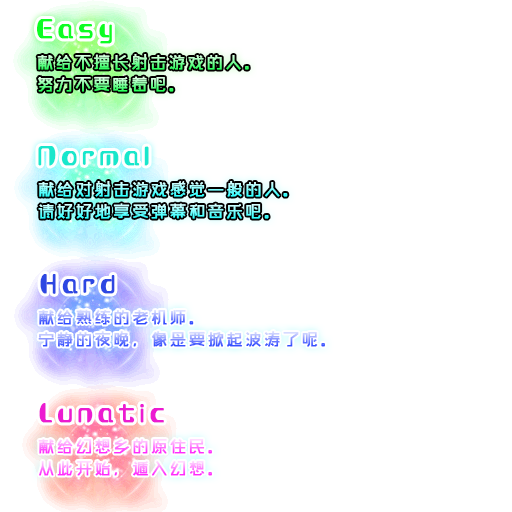
<style>
.page{position:relative;width:512px;height:512px;background:#ffffff}
.page>*{position:absolute;margin:0}
.t1{font:24px "MFKeKe_Noncommercial-Regular";letter-spacing:0.15em;color:#0dfd23;font-weight:bold}
.t2{font:16px "MFShangHei_Noncommercial-Regular";letter-spacing:0.15em;font-weight:bold}
.t3{font:24px "MFKeKe_Noncommercial-Regular";letter-spacing:0.15em;color:#19e7cc;font-weight:bold}
.t4{font:24px "MFKeKe_Noncommercial-Regular";letter-spacing:0.15em;color:#2d47e2;font-weight:bold}
.t5{font:24px "MFKeKe_Noncommercial-Regular";letter-spacing:0.15em;color:#ec1bd1;font-weight:bold}
</style>
<div class="page">
<p class="t1" style="left:37px;top:19px;width:75px;height:25px">Easy</p>
<p class="t2" style="left:37px;top:54px;width:212px;height:16px">献给不擅长射击游戏的人。</p>
<p class="t2" style="left:38px;top:76px;width:136px;height:16px">努力不要睡着吧。</p>
<p class="t3" style="left:38px;top:146px;width:111px;height:20px">Normal</p>
<p class="t2" style="left:38px;top:181px;width:250px;height:16px">献给对射击游戏感觉一般的人。</p>
<p class="t2" style="left:38px;top:203px;width:231px;height:16px">请好好地享受弹幕和音乐吧。</p>
<p class="t4" style="left:40px;top:274px;width:75px;height:20px">Hard</p>
<p class="t2" style="left:38px;top:309px;width:156px;height:16px">献给熟练的老机师。</p>
<p class="t2" style="left:38px;top:331px;width:287px;height:16px">宁静的夜晚，像是要掀起波涛了呢。</p>
<p class="t5" style="left:39px;top:403px;width:125px;height:20px">Lunatic</p>
<p class="t2" style="left:38px;top:439px;width:174px;height:15px">献给幻想乡的原住民。</p>
<p class="t2" style="left:39px;top:461px;width:173px;height:15px">从此开始，遁入幻想。</p>
</div>
